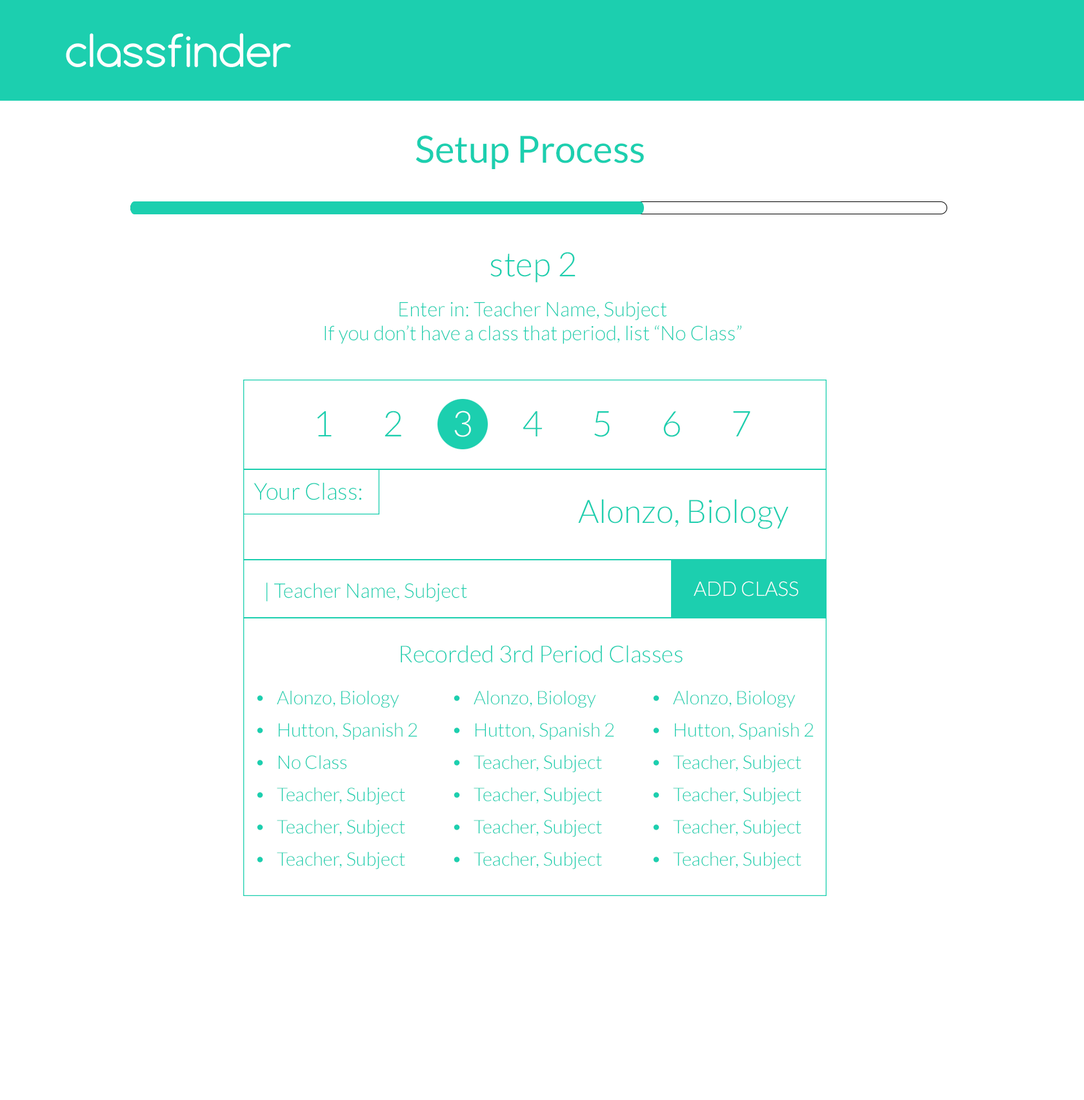
<style>
.page{position:relative;width:1084px;height:1100px;background:#ffffff}
.page>*{position:absolute;margin:0}
.t1{font:37.4px "Lato-Regular";color:#1ccfaf}
.t2{font:33.6px "Lato-Light";color:#1ccfaf}
.t3{font:20px "Lato-Light";color:#1ccfaf}
.t4{font:35.5px "Lato-Light";color:#1ccfaf}
.t5{font:35.5px "Lato-Light";color:#ffffff}
.t6{font:23.2px "Lato-Light";color:#1ccfaf}
.t7{font:32.3px "Lato-Light";color:#1ccfaf}
.t8{font:20px "Lato-Light";color:#ffffff}
.t9{font:59.6px "Lato-Light";color:#1ccfaf}
.t10{font:18.7px "Lato-Light";color:#1ccfaf}
</style>
<div class="page">
<p class="t1" style="left:416px;top:136px;width:228px;height:33px">Setup Process</p>
<p class="t2" style="left:491px;top:252px;width:85px;height:31px">step 2</p>
<p class="t3" style="left:325px;top:301px;width:417px;height:43px;text-align:center">Enter in: Teacher Name, Subject<br>If you don’t have a class that period, list “No Class”</p>
<p class="t4" style="left:317px;top:410px;width:434px;height:27px">1   2   <span class="t5">3 </span>  4   5   6   7</p>
<p class="t6" style="left:254px;top:482px;width:107px;height:18px">Your Class:</p>
<p class="t7" style="left:578px;top:499px;width:211px;height:30px">Alonzo, Biology</p>
<p class="t8" style="left:694px;top:581px;width:104px;height:15px">ADD CLASS</p>
<p class="t3" style="left:267px;top:582px;width:200px;height:20px">| Teacher Name, Subject</p>
<p class="t6" style="left:401px;top:645px;width:282px;height:18px">Recorded 3rd Period Classes</p>
<p class="t9" style="left:257px;top:695px;width:6px;height:6px">.</p>
<p class="t10" style="left:277px;top:691px;width:123px;height:17px">Alonzo, Biology</p>
<p class="t9" style="left:454px;top:695px;width:6px;height:6px">.</p>
<p class="t10" style="left:474px;top:691px;width:122px;height:17px">Alonzo, Biology</p>
<p class="t9" style="left:653px;top:695px;width:7px;height:6px">.</p>
<p class="t10" style="left:673px;top:691px;width:123px;height:17px">Alonzo, Biology</p>
<p class="t10" style="left:279px;top:722px;width:139px;height:18px">Hutton, Spanish 2</p>
<p class="t10" style="left:476px;top:722px;width:138px;height:18px">Hutton, Spanish 2</p>
<p class="t10" style="left:675px;top:722px;width:139px;height:18px">Hutton, Spanish 2</p>
<p class="t9" style="left:257px;top:727px;width:6px;height:6px">.</p>
<p class="t9" style="left:454px;top:727px;width:6px;height:6px">.</p>
<p class="t9" style="left:653px;top:727px;width:7px;height:6px">.</p>
<p class="t9" style="left:257px;top:760px;width:6px;height:5px">.</p>
<p class="t10" style="left:279px;top:755px;width:68px;height:14px">No Class</p>
<p class="t9" style="left:454px;top:760px;width:6px;height:5px">.</p>
<p class="t10" style="left:474px;top:754px;width:128px;height:19px">Teacher, Subject</p>
<p class="t9" style="left:653px;top:760px;width:7px;height:5px">.</p>
<p class="t10" style="left:673px;top:754px;width:129px;height:19px">Teacher, Subject</p>
<p class="t9" style="left:257px;top:792px;width:6px;height:6px">.</p>
<p class="t10" style="left:277px;top:787px;width:128px;height:18px">Teacher, Subject</p>
<p class="t9" style="left:454px;top:792px;width:6px;height:6px">.</p>
<p class="t10" style="left:474px;top:787px;width:128px;height:18px">Teacher, Subject</p>
<p class="t9" style="left:653px;top:792px;width:7px;height:6px">.</p>
<p class="t10" style="left:673px;top:787px;width:129px;height:18px">Teacher, Subject</p>
<p class="t10" style="left:277px;top:819px;width:128px;height:18px">Teacher, Subject</p>
<p class="t10" style="left:474px;top:819px;width:128px;height:18px">Teacher, Subject</p>
<p class="t10" style="left:673px;top:819px;width:129px;height:18px">Teacher, Subject</p>
<p class="t9" style="left:257px;top:824px;width:6px;height:6px">.</p>
<p class="t9" style="left:454px;top:824px;width:6px;height:6px">.</p>
<p class="t9" style="left:653px;top:824px;width:7px;height:6px">.</p>
<p class="t9" style="left:257px;top:856px;width:6px;height:6px">.</p>
<p class="t10" style="left:277px;top:851px;width:128px;height:18px">Teacher, Subject</p>
<p class="t9" style="left:454px;top:856px;width:6px;height:6px">.</p>
<p class="t10" style="left:474px;top:851px;width:128px;height:18px">Teacher, Subject</p>
<p class="t9" style="left:653px;top:856px;width:7px;height:6px">.</p>
<p class="t10" style="left:673px;top:851px;width:129px;height:18px">Teacher, Subject</p>
</div>
